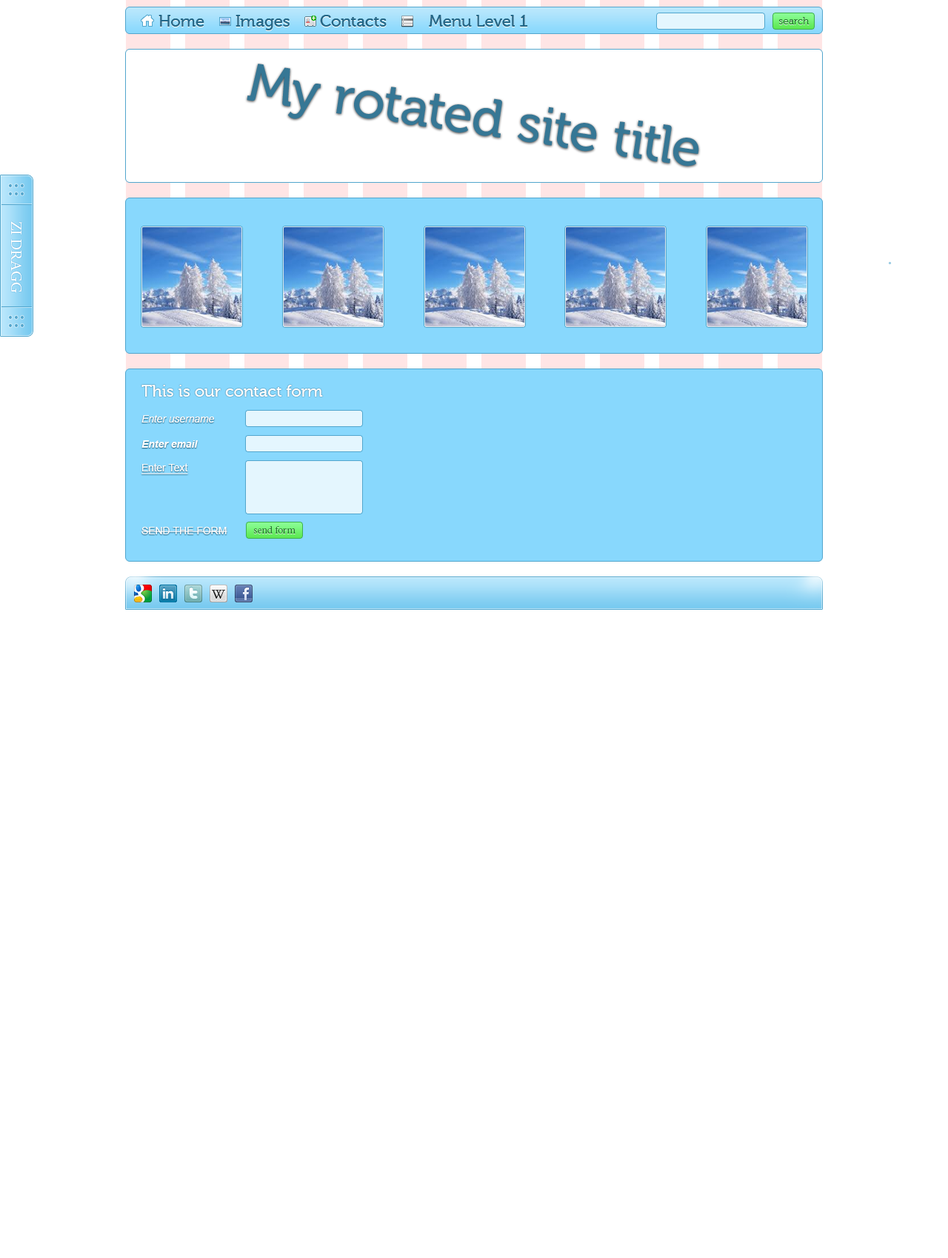
<style>
.page{position:relative;width:948px;height:1258px;background:#ffffff}
.page>*{position:absolute;margin:0}
.t1{font:16.3px "Museo500-Regular";color:#226787}
.t2{font:10.4px "Museo300-Regular";color:#22792c}
.t3{font:53.3px "Museo500-Regular";color:#367795}
.t4{font:27.3px "MinionPro-Regular";color:#52a6cd}
.t5{font:15.5px "MinionPro-Regular";color:#ffffff}
.t6{font:16.3px "Museo500-Regular";color:#ffffff}
.t7{font:10.4px "Arial-ItalicMT";color:#ffffff}
.t8{font:10.4px "Arial-BoldItalicMT";color:#ffffff}
.t9{font:10.4px "ArialMT";color:#ffffff;text-decoration:underline}
.t10{font:10.4px "ArialMT";color:#ffffff;text-transform:uppercase}
.t11{font:10.4px "MinionPro-Regular";color:#22792c}
</style>
<div class="page">
<p class="t1" style="left:158px;top:15px;width:46px;height:12px">Home</p>
<p class="t1" style="left:158px;top:15px;width:46px;height:12px">Home</p>
<p class="t1" style="left:235px;top:15px;width:54px;height:15px">Images</p>
<p class="t1" style="left:235px;top:15px;width:54px;height:15px">Images</p>
<p class="t1" style="left:320px;top:15px;width:66px;height:12px">Contacts</p>
<p class="t1" style="left:320px;top:15px;width:66px;height:12px">Contacts</p>
<p class="t1" style="left:429px;top:15px;width:99px;height:12px">Menu Level 1</p>
<p class="t1" style="left:429px;top:15px;width:99px;height:12px">Menu Level 1</p>
<p class="t2" style="left:778px;top:17px;width:31px;height:7px">search</p>
<p class="t3" style="left:247px;top:64px;width:452px;height:103px;rotate:8deg">My rotated site title</p>
<p class="t4" style="left:9px;top:184px;width:15px;height:11px">:::</p>
<p class="t5" style="left:11px;top:221px;width:11px;height:72px;rotate:90deg">ZI DRAGG</p>
<p class="t4" style="left:9px;top:315px;width:15px;height:12px">:::</p>
<p class="t6" style="left:141px;top:385px;width:182px;height:12px">This is our contact form</p>
<p class="t7" style="left:141px;top:415px;width:74px;height:8px">Enter username</p>
<p class="t8" style="left:141px;top:440px;width:57px;height:8px">Enter email</p>
<p class="t9" style="left:141px;top:463px;width:47px;height:12px">Enter Text</p>
<p class="t10" style="left:141px;top:527px;width:86px;height:7px">send the form</p>
<p class="t11" style="left:253px;top:526px;width:42px;height:8px">send form</p>
</div>
